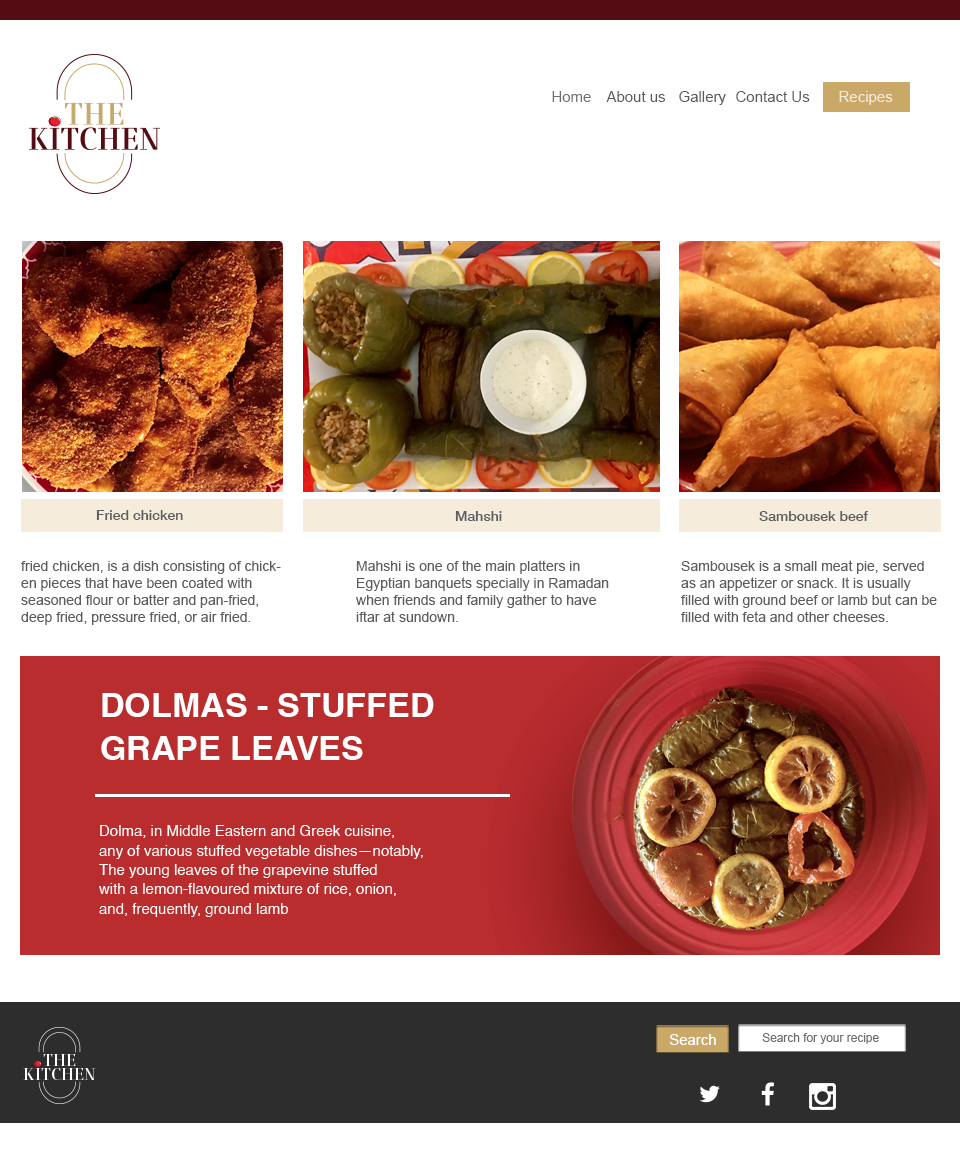
<style>
.page{position:relative;width:960px;height:1172px;background:#ffffff}
.page>*{position:absolute;margin:0}
.t1{font:15px "ArialMT";color:#6f6f72}
.t2{font:15px "ArialMT";color:#58595b}
.t3{font:15px "ArialMT";color:#f5ecdb}
.t4{font:14px "HelveticaNeue-Medium";color:#5b5d60}
.t5{font:14px/17px "ArialMT";color:#5b5d60}
.t6{font:34px/43.8px "Helvetica-Bold";color:#ffffff}
.t7{font:15px/19.3px "Helvetica";color:#ffffff}
.t8{font:14.9px "ArialMT";color:#ffffff}
.t9{font:11.9px "ArialMT";color:#6e6e6e}
</style>
<div class="page">
<p class="t1" style="left:552px;top:91px;width:39px;height:11px">Home</p>
<p class="t2" style="left:606px;top:91px;width:60px;height:11px">About us</p>
<p class="t2" style="left:679px;top:91px;width:47px;height:14px">Gallery</p>
<p class="t2" style="left:736px;top:91px;width:74px;height:11px">Contact Us</p>
<p class="t3" style="left:839px;top:91px;width:54px;height:14px">Recipes</p>
<p class="t4" style="left:96px;top:510px;width:87px;height:10px">Fried chicken</p>
<p class="t4" style="left:455px;top:511px;width:47px;height:10px">Mahshiv</p>
<p class="t4" style="left:759px;top:511px;width:109px;height:10px">Sambousek beef</p>
<p class="t5" style="left:21px;top:560px;width:260px;height:65px">fried chicken, is a dish consisting of chicken pieces that have been coated with seasoned flour or batter and pan-fried, deep fried, pressure fried, or air fried.</p>
<p class="t5" style="left:356px;top:560px;width:253px;height:62px">Mahshi is one of the main platters in Egyptian banquets specially in Ramadan when friends and family gather to have iftar at sundown.</p>
<p class="t5" style="left:681px;top:560px;width:256px;height:62px">Sambousek is a small meat pie, served as an appetizer or snack. It is usually filled with ground beef or lamb but can be filled with feta and other cheeses.</p>
<p class="t6" style="left:101px;top:693px;width:333px;height:67px">DOLMAS - STUFFED<br>GRAPE LEAVES</p>
<p class="t7" style="left:99px;top:825px;width:324px;height:92px">Dolma, in Middle Eastern and Greek cuisine,<br>any of various stuffed vegetable dishes—notably,<br>The young leaves of the grapevine stuffed<br>with a lemon-flavoured mixture of rice, onion,<br>and, frequently, ground lamb</p>
<p class="t8" style="left:669px;top:1034px;width:47px;height:11px">Search</p>
<p class="t9" style="left:762px;top:1033px;width:117px;height:11px">Search for your recipe</p>
</div>
